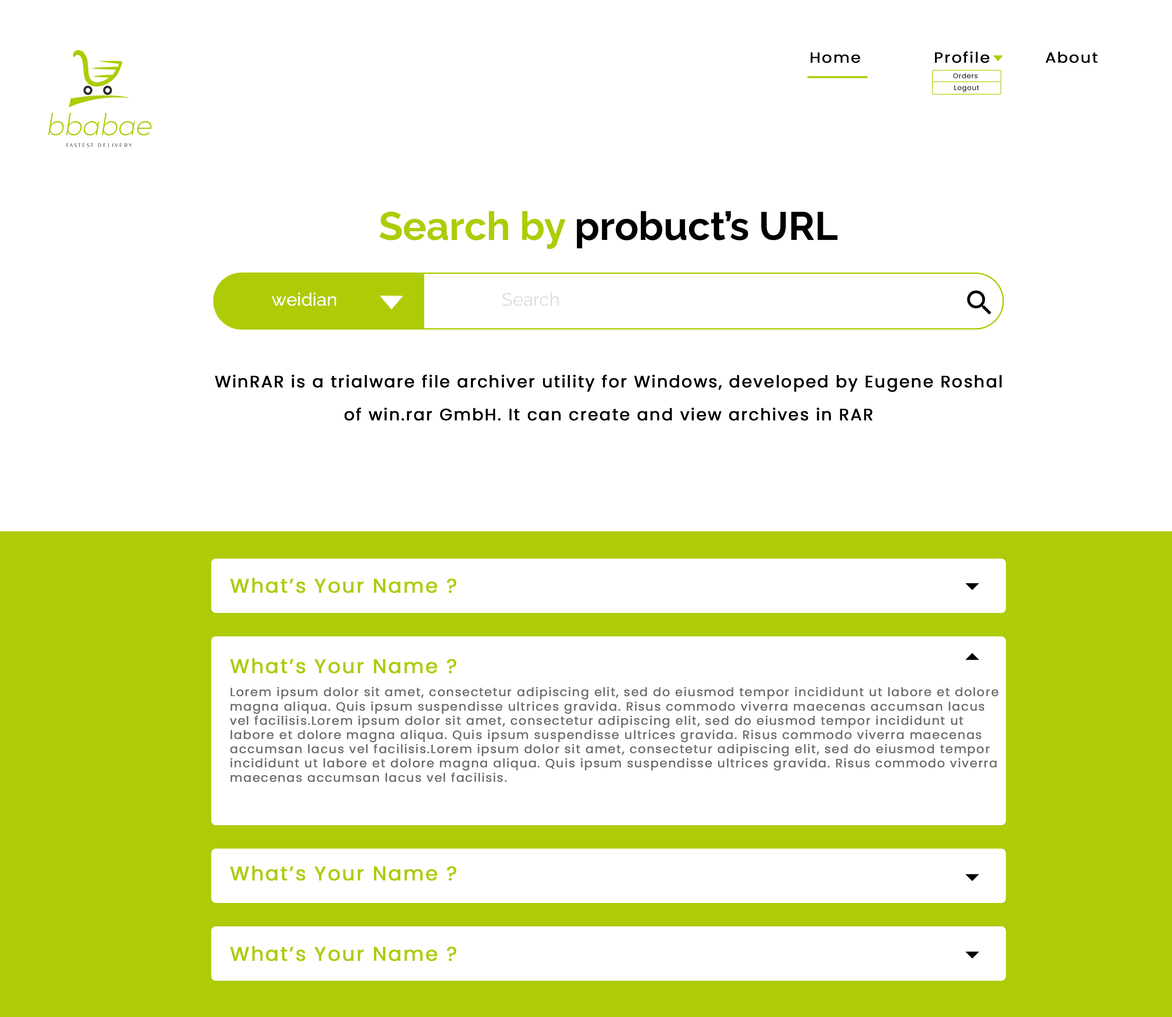
<style>
.page{position:relative;width:1172px;height:1017px;background:#ffffff}
.page>*{position:absolute;margin:0}
.t1{font:14.7px "Poppins-Regular";letter-spacing:0.06em;color:#000000;font-weight:bold;scale:1.07 1}
.t2{font:6.6px "Poppins-Light";letter-spacing:0.06em;color:#010000;font-weight:bold}
.t3{font:39.6px "Raleway-Bold";color:#000000}
.t4{font:39.6px "Raleway-Bold";color:#afcb07}
.t5{font:18.1px "Raleway-Medium";color:#ffffff}
.t6{font:18.1px "Raleway-Regular";color:#dbdbda}
.t7{font:16.5px/33px "Poppins-Regular";letter-spacing:0.06em;color:#010000;font-weight:bold}
.t8{font:19.8px "Poppins-Regular";letter-spacing:0.06em;color:#afcb07;font-weight:bold}
.t9{font:11.9px "Poppins-Regular";letter-spacing:0.06em;color:#6e6e6c;font-weight:bold}
</style>
<div class="page">
<p class="t1" style="left:811px;top:52px;width:49px;height:11px">Home</p>
<p class="t1" style="left:935px;top:51px;width:55px;height:12px">Profile</p>
<p class="t1" style="left:1046px;top:52px;width:52px;height:11px">About</p>
<p class="t2" style="left:953px;top:73px;width:25px;height:5px">Orders</p>
<p class="t2" style="left:954px;top:85px;width:25px;height:7px">Logout</p>
<p class="t3" style="left:379px;top:211px;width:459px;height:38px"><span class="t4">Search by </span>probuct’s URL</p>
<p class="t5" style="left:272px;top:292px;width:64px;height:14px">weidian</p>
<p class="t6" style="left:502px;top:292px;width:57px;height:14px">Search</p>
<p class="t7" style="left:215px;top:374px;width:787px;height:47px;text-align:center">WinRAR is a trialware file archiver utility for Windows, developed by Eugene Roshal of win.rar GmbH. It can create and view archives in RAR</p>
<p class="t8" style="left:230px;top:578px;width:227px;height:15px">What’s Your Name ?</p>
<p class="t8" style="left:230px;top:658px;width:227px;height:16px">What’s Your Name ?</p>
<p class="t9" style="left:230px;top:687px;width:768px;height:95px">Lorem ipsum dolor sit amet, consectetur adipiscing elit, sed do eiusmod tempor incididunt ut labore et dolore magna aliqua. Quis ipsum suspendisse ultrices gravida. Risus commodo viverra maecenas accumsan lacus vel facilisis.Lorem ipsum dolor sit amet, consectetur adipiscing elit, sed do eiusmod tempor incididunt ut labore et dolore magna aliqua. Quis ipsum suspendisse ultrices gravida. Risus commodo viverra maecenas accumsan lacus vel facilisis.Lorem ipsum dolor sit amet, consectetur adipiscing elit, sed do eiusmod tempor incididunt ut labore et dolore magna aliqua. Quis ipsum suspendisse ultrices gravida. Risus commodo viverra maecenas accumsan lacus vel facilisis.</p>
<p class="t8" style="left:230px;top:866px;width:227px;height:15px">What’s Your Name ?</p>
<p class="t8" style="left:230px;top:946px;width:227px;height:16px">What’s Your Name ?</p>
</div>
